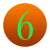
<style>
.page{position:relative;width:50px;height:50px;background:#ffffff}
.page>*{position:absolute;margin:0}
.t1{font:48.8px "NuevaStd-Cond";color:#39de54}
</style>
<div class="page">
<p class="t1" style="left:17px;top:10px;width:16px;height:30px">6</p>
</div>
